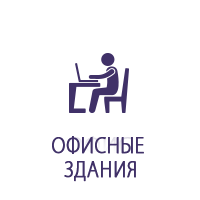
<style>
.page{position:relative;width:200px;height:200px;background:#ffffff}
.page>*{position:absolute;margin:0}
.t1{font:23.9px/38.2px "MyriadPro-Light";letter-spacing:0.025em;color:#403168;font-variant:small-caps;font-weight:bold;scale:0.83 1}
.t2{font:23.9px/24px "MyriadPro-Light";letter-spacing:0.025em;color:#403168;font-variant:small-caps;font-weight:bold;scale:0.83 1}
</style>
<div class="page">
<p class="t1" style="left:52px;top:136px;width:92px;height:46px;text-align:center">ОФИСНЫЕ <br><span class="t2">ЗДАНИЯ</span></p>
</div>
